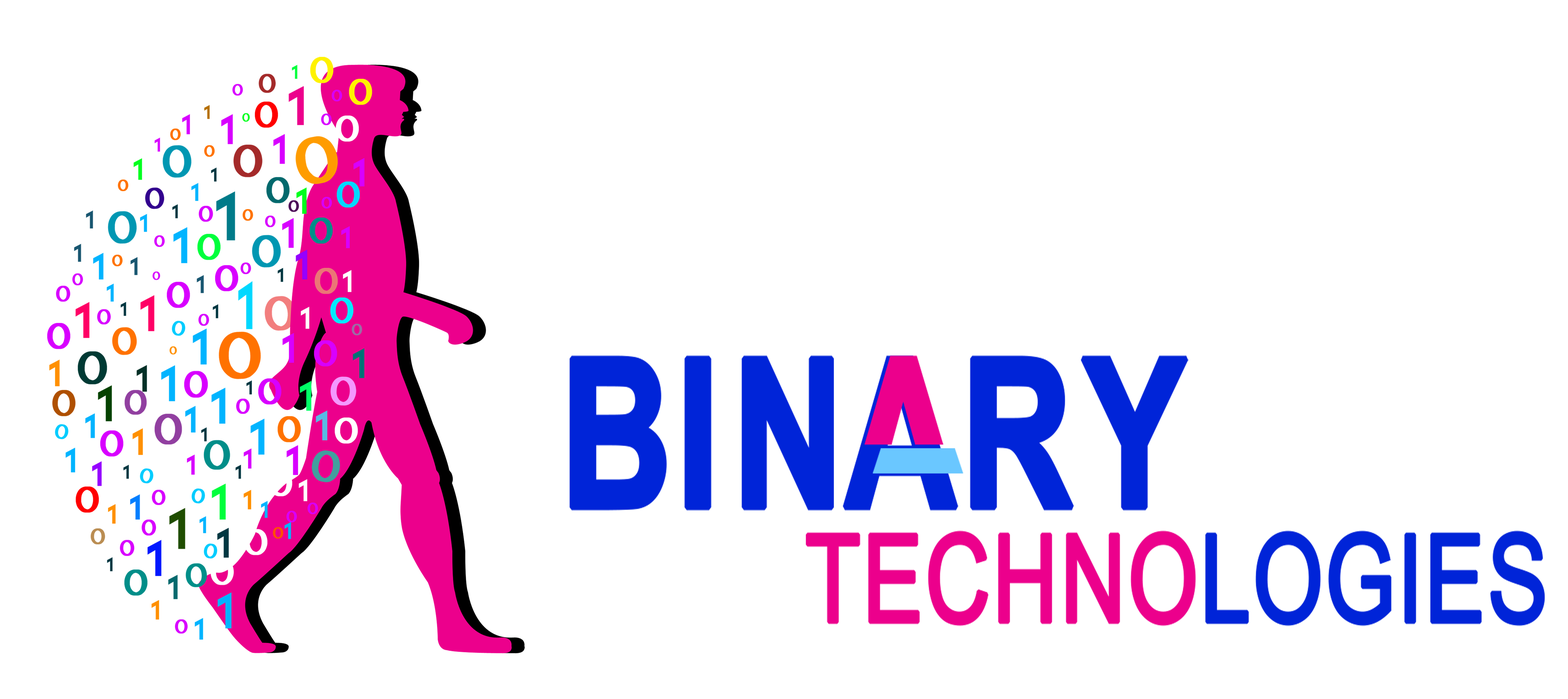
<style>
.page{position:relative;width:1568px;height:699px;background:#ffffff}
.page>*{position:absolute;margin:0}
.t1{font:207.3px "Arial-BoldMT";color:#0024d8;font-weight:bold;scale:0.75 1}
.t2{font:207.3px "Arial-BoldMT";letter-spacing:0.06em;color:#0024d8;font-weight:bold;scale:0.75 1}
.t3{font:207.3px "Arial-BoldMT";letter-spacing:-0.04em;color:#0024d8;font-weight:bold;scale:0.75 1}
.t4{font:207.3px "Arial-BoldMT";letter-spacing:-0.02em;font-weight:bold;scale:0.75 1}
.t5{font:207.3px "Arial-BoldMT";letter-spacing:0.12em;color:#0024d8;font-weight:bold;scale:0.75 1}
.t6{font:120.7px "ArialMT";color:#ec008c;font-weight:bold;scale:0.75 1}
.t7{font:175.6px "AlienLeague";letter-spacing:0.12em;color:#00aeef;font-weight:bold;scale:0.75 1}
.t8{font:120.7px "ArialMT";color:#0024d8;font-weight:bold;scale:0.75 1}
</style>
<div class="page">
<p class="t1" style="left:569px;top:355px;width:265px;height:155px">B<span class="t2">I</span><span class="t3">N</span></p>
<p class="t4" style="left:842px;top:355px;width:116px;height:155px">A</p>
<p class="t5" style="left:970px;top:355px;width:218px;height:155px">RY</p>
<p class="t6" style="left:806px;top:530px;width:740px;height:96px"><span class="t7"> <br>   </span>TECHNO<span class="t8">LOGIES</span></p>
</div>
